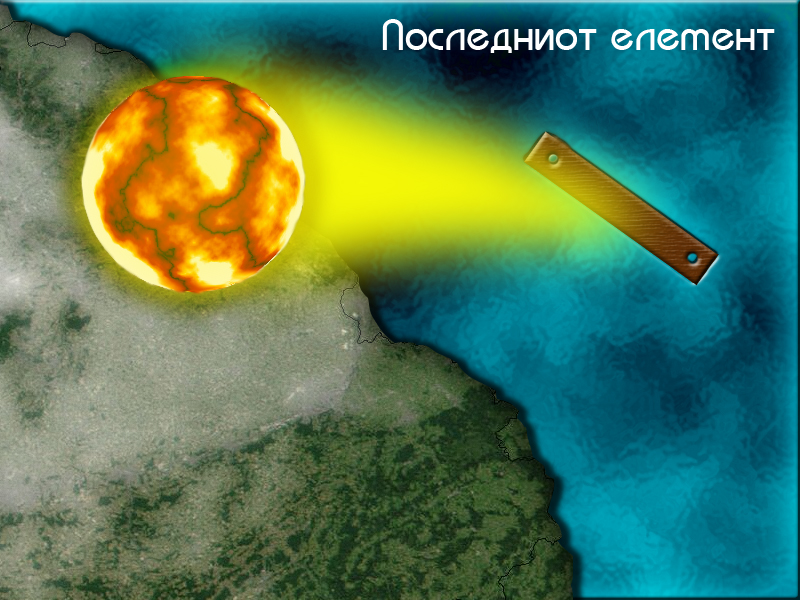
<style>
.page{position:relative;width:800px;height:600px}
.page>*{position:absolute;margin:0}
.t1{font:48px "Macedonian-Bahamas";color:#ffffff}
</style>
<div class="page">
<p class="t1" style="left:382px;top:19px;width:393px;height:34px">Posledniot element</p>
</div>
